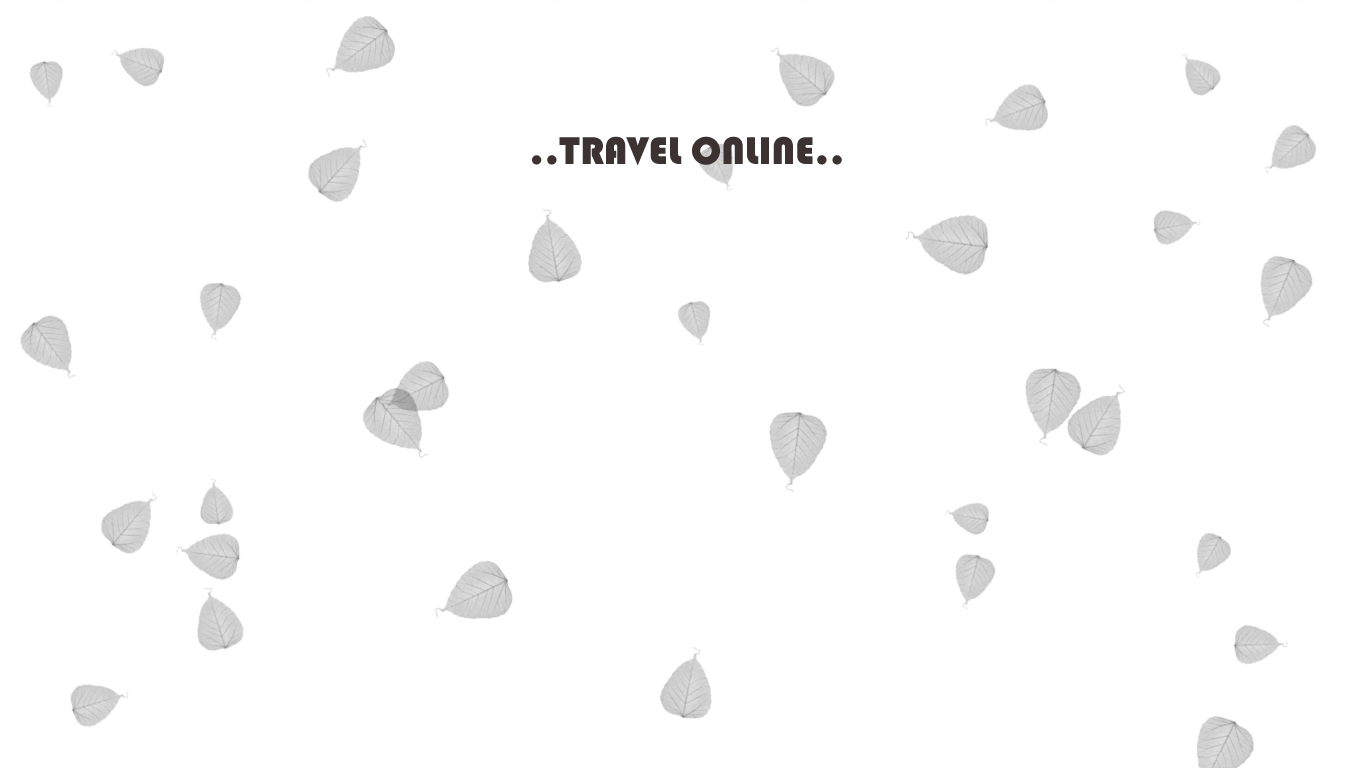
<style>
.page{position:relative;width:1366px;height:768px;background:#ffffff}
.page>*{position:absolute;margin:0}
.t1{font:40px "Bauhaus93";color:#3d3232}
</style>
<div class="page">
<p class="t1" style="left:532px;top:136px;width:310px;height:30px">..TRAVEL ONLINE..</p>
</div>
